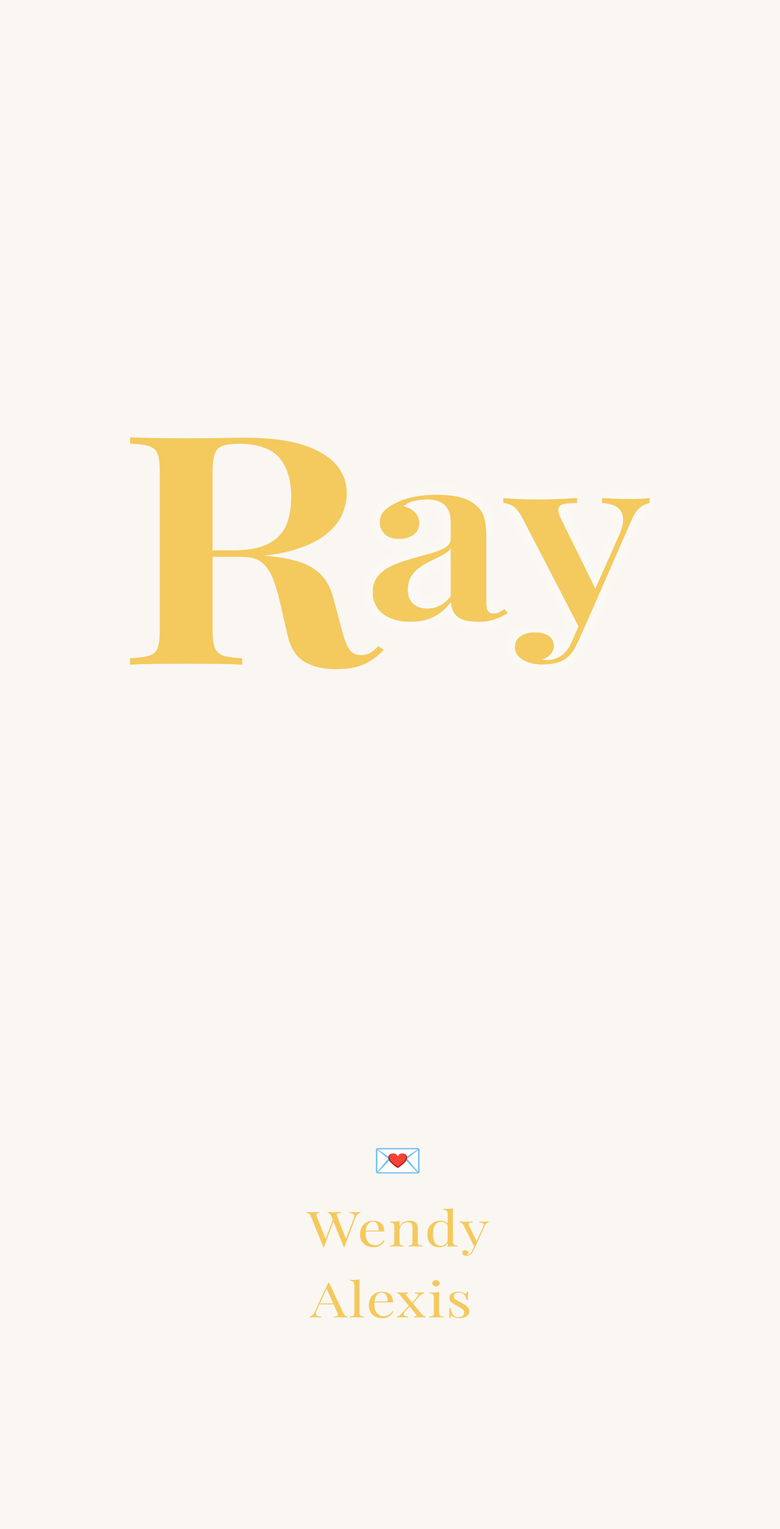
<style>
.page{position:relative;width:780px;height:1529px;background:#faf7f2}
.page>*{position:absolute;margin:0}
.t1{font:321.2px "PlayfairDisplayRoman-SemiBold";letter-spacing:0.02em;color:#f4c95d;scale:1.2 1}
.t2{font:236.2px "PlayfairDisplayRoman-SemiBold";letter-spacing:0.02em;color:#f4c95d;scale:1.2 1}
.t3{font:48.8px "PlayfairDisplay-Regular";letter-spacing:0.02em;color:#f4c95d;scale:1.2 1}
</style>
<div class="page">
<p class="t1" style="left:130px;top:437px;width:254px;height:233px">R</p>
<p class="t2" style="left:372px;top:495px;width:278px;height:170px">ay</p>
<p class="t3" style="left:306px;top:1209px;width:182px;height:47px">Wendy</p>
<p class="t3" style="left:310px;top:1279px;width:160px;height:39px">Alexis</p>
</div>
